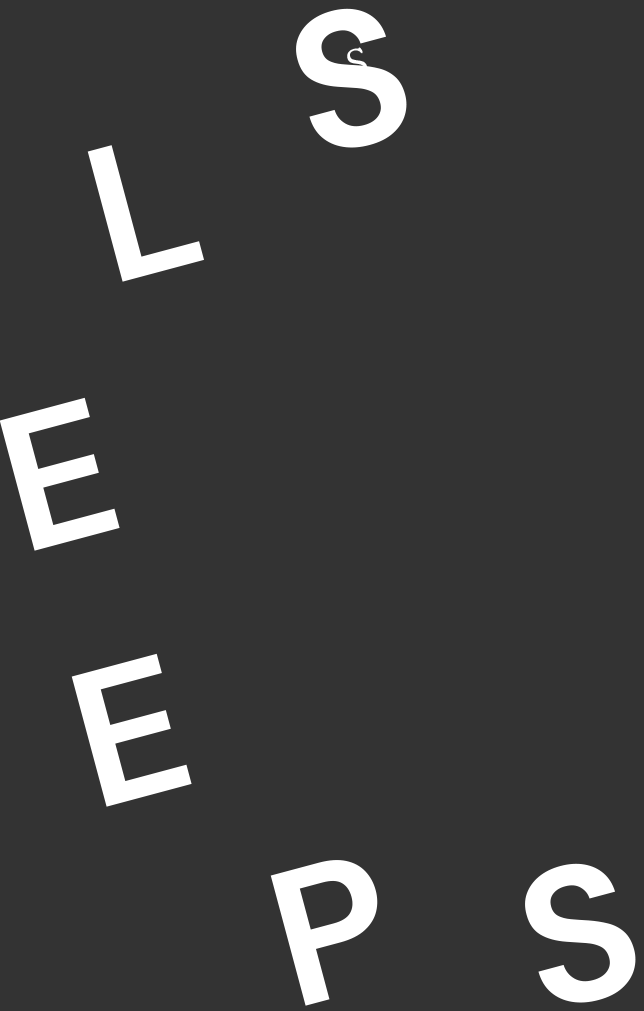
<style>
.page{position:relative;width:644px;height:1011px;background:#333333}
.page>*{position:absolute;margin:0}
.t1{font:192.2px "DMSans-Bold";letter-spacing:0.02em;color:#ffffff}
.t2{font:36.3px "CooperBT-Light";letter-spacing:0.02em;color:#ffffff}
</style>
<div class="page">
<p class="t1" style="left:296px;top:8px;width:111px;height:140px;rotate:-15deg">S</p>
<p class="t2" style="left:347px;top:47px;width:21px;height:30px;rotate:-15deg">S</p>
<p class="t1" style="left:87px;top:145px;width:117px;height:137px;rotate:-15deg">L</p>
<p class="t1" style="left:0px;top:397px;width:120px;height:154px;rotate:-15deg">E</p>
<p class="t1" style="left:71px;top:653px;width:121px;height:154px;rotate:-15deg">E</p>
<p class="t1" style="left:270px;top:860px;width:108px;height:146px;rotate:-15deg">P</p>
<p class="t1" style="left:525px;top:863px;width:111px;height:140px;rotate:-15deg">S</p>
</div>
